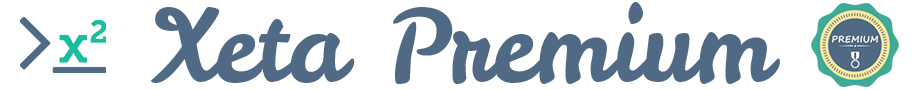
<style>
.page{position:relative;width:920px;height:90px;background:#ffffff}
.page>*{position:absolute;margin:0}
.t1{font:100px "LeckerliOne";color:#506a85}
</style>
<div class="page">
<p class="t1" style="left:151px;top:2px;width:629px;height:82px">Xeta Premium</p>
</div>
